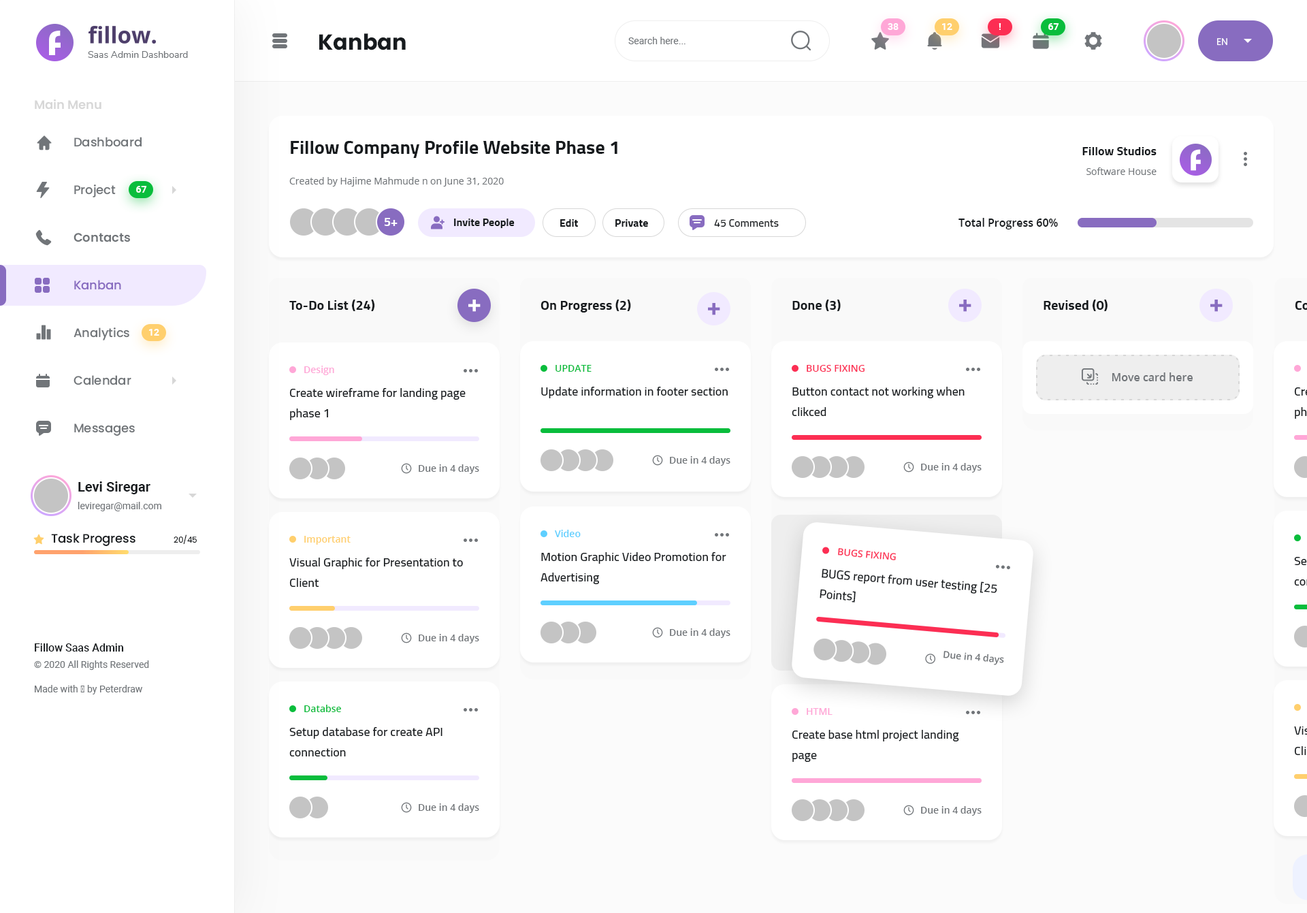
<style>
.page{position:relative;width:1307px;height:913px;background:#ffffff}
.page>*{position:absolute;margin:0}
.t1{font:9.5px "Roboto-Bold";color:#ffffff}
.t2{font:21.8px "Poppins-Bold";color:#171b1e}
.t3{font:9.5px "Roboto-Regular";color:#717579}
.t4{font:9.5px "Poppins-Regular";color:#ffffff}
.t5{font:9.5px "Nunito-Regular";color:#717579}
.t6{font:12.2px "Poppins-SemiBold";color:#d7d7d7}
.t7{font:12.2px "Poppins-Medium";color:#717579}
.t8{font:19.1px "Cairo-Bold";color:#171b1e}
.t9{font:12.2px "Cairo-Bold";color:#171b1e}
.t10{font:9.5px "OpenSans-Regular";color:#717579}
.t11{font:12.2px "Cairo-Bold";color:#ffffff}
.t12{font:10.9px "Cairo-Bold";color:#171b1e}
.t13{font:10.9px "Cairo-SemiBold";color:#171b1e}
.t14{font:10.9px "OpenSans-SemiBold";color:#171b1e}
.t15{font:12.2px "Poppins-SemiBold";color:#717579}
.t16{font:12.2px "Poppins-Medium";color:#886cc0}
.t17{font:13.6px "Cairo-Bold";color:#171b1e}
.t18{font:9.5px "OpenSans-SemiBold";color:#ffa7d7}
.t19{font:9.5px "OpenSans-SemiBold";color:#09bd3c}
.t20{font:9.5px "OpenSans-SemiBold";color:#fc2e53}
.t21{font:10.9px "OpenSans-SemiBold";color:#717579}
.t22{font:12.2px/20.4px "Cairo-SemiBold";color:#171b1e}
.t23{font:12.2px "Cairo-SemiBold";color:#171b1e}
.t24{font:9.5px "OpenSans-SemiBold";color:#717579}
.t25{font:13.6px "Roboto-Bold";color:#171b1e}
.t26{font:12.2px "Poppins-Medium";color:#171b1e}
.t27{font:9.5px "OpenSans-SemiBold";color:#5ecfff}
.t28{font:8.2px "Poppins-Regular";color:#171b1e}
.t29{font:9.5px "OpenSans-SemiBold";color:#ffcf6d}
.t30{font:10.9px "Roboto-Medium";color:#171b1e}
</style>
<div class="page">
<p class="t1" style="left:887px;top:23px;width:11px;height:7px">38</p>
<p class="t1" style="left:942px;top:23px;width:10px;height:7px">12</p>
<p class="t1" style="left:998px;top:23px;width:3px;height:7px">!</p>
<p class="t1" style="left:1048px;top:23px;width:11px;height:7px">67</p>
<p class="t2" style="left:319px;top:33px;width:87px;height:17px">Kanban</p>
<p class="t3" style="left:628px;top:37px;width:57px;height:7px">Search here...</p>
<p class="t4" style="left:1217px;top:38px;width:10px;height:8px">EN</p>
<p class="t5" style="left:88px;top:51px;width:100px;height:7px">Saas Admin Dashboard</p>
<p class="t6" style="left:35px;top:99px;width:66px;height:11px">Main Menu</p>
<p class="t7" style="left:74px;top:137px;width:68px;height:10px">Dashboard</p>
<p class="t8" style="left:291px;top:141px;width:326px;height:17px">Fillow Company Profile Website Phase 1</p>
<p class="t9" style="left:1082px;top:147px;width:74px;height:8px">Fillow Studios</p>
<p class="t10" style="left:1086px;top:167px;width:70px;height:8px">Software House</p>
<p class="t7" style="left:74px;top:184px;width:42px;height:13px">Project</p>
<p class="t1" style="left:136px;top:186px;width:11px;height:7px">67</p>
<p class="t10" style="left:289px;top:177px;width:215px;height:9px">Created by Hajime Mahmude n on June 31, 2020</p>
<p class="t11" style="left:384px;top:218px;width:13px;height:8px">5+</p>
<p class="t12" style="left:454px;top:218px;width:60px;height:10px">Invite People</p>
<p class="t12" style="left:560px;top:219px;width:18px;height:8px">Edit</p>
<p class="t12" style="left:615px;top:219px;width:33px;height:8px">Private</p>
<p class="t13" style="left:714px;top:219px;width:65px;height:8px">45 Comments</p>
<p class="t14" style="left:958px;top:218px;width:100px;height:11px">Total Progress 60%</p>
<p class="t15" style="left:73px;top:233px;width:57px;height:9px">Contacts</p>
<p class="t16" style="left:74px;top:280px;width:47px;height:10px">Kanban</p>
<p class="t17" style="left:289px;top:299px;width:86px;height:12px">To-Do List (24)</p>
<p class="t17" style="left:540px;top:299px;width:91px;height:13px">On Progress (2)</p>
<p class="t17" style="left:792px;top:299px;width:48px;height:12px">Done (3)</p>
<p class="t17" style="left:1043px;top:299px;width:64px;height:12px">Revised (0)</p>
<p class="t7" style="left:73px;top:327px;width:56px;height:13px">Analytics</p>
<p class="t1" style="left:149px;top:329px;width:10px;height:7px">12</p>
<p class="t18" style="left:304px;top:365px;width:30px;height:10px">Design</p>
<p class="t19" style="left:555px;top:365px;width:36px;height:7px">UPDATE</p>
<p class="t20" style="left:806px;top:365px;width:58px;height:7px">BUGS FIXING</p>
<p class="t7" style="left:73px;top:375px;width:58px;height:10px">Calendar</p>
<p class="t21" style="left:1111px;top:372px;width:82px;height:9px">Move card here</p>
<p class="t22" style="left:289px;top:388px;width:176px;height:32px">Create wireframe for landing page phase 1</p>
<p class="t23" style="left:541px;top:387px;width:186px;height:11px">Update information in footer section</p>
<p class="t22" style="left:791px;top:387px;width:173px;height:29px">Button contact not working when clikced</p>
<p class="t7" style="left:74px;top:423px;width:61px;height:13px">Messages</p>
<p class="t24" style="left:670px;top:456px;width:60px;height:9px">Due in 4 days</p>
<p class="t24" style="left:419px;top:464px;width:60px;height:10px">Due in 4 days</p>
<p class="t24" style="left:921px;top:463px;width:60px;height:9px">Due in 4 days</p>
<p class="t25" style="left:78px;top:481px;width:72px;height:13px">Levi Siregar</p>
<p class="t3" style="left:78px;top:502px;width:83px;height:9px">leviregar@mail.com</p>
<p class="t26" style="left:51px;top:533px;width:84px;height:13px">Task Progress</p>
<p class="t27" style="left:555px;top:529px;width:25px;height:8px">Video</p>
<p class="t28" style="left:174px;top:534px;width:23px;height:10px">20/45</p>
<p class="t29" style="left:304px;top:536px;width:46px;height:8px">Important</p>
<p class="t22" style="left:289px;top:557px;width:174px;height:30px">Visual Graphic for Presentation to Client</p>
<p class="t22" style="left:540px;top:552px;width:186px;height:32px">Motion Graphic Video Promotion for Advertising</p>
<p class="t20" style="left:838px;top:548px;width:58px;height:12px;rotate:5deg">BUGS FIXING</p>
<p class="t23" style="left:819px;top:568px;width:178px;height:34px;rotate:5deg">BUGS report from user testing [25 Points]</p>
<p class="t24" style="left:670px;top:628px;width:60px;height:10px">Due in 4 days</p>
<p class="t24" style="left:419px;top:634px;width:60px;height:9px">Due in 4 days</p>
<p class="t30" style="left:35px;top:643px;width:89px;height:8px">Fillow Saas Admin</p>
<p class="t24" style="left:943px;top:651px;width:61px;height:14px;rotate:5deg">Due in 4 days</p>
<p class="t3" style="left:34px;top:660px;width:115px;height:10px">© 2020 All Rights Reserved</p>
<p class="t3" style="left:35px;top:685px;width:108px;height:9px">Made with ♥ by Peterdraw</p>
<p class="t19" style="left:304px;top:704px;width:37px;height:8px">Databse</p>
<p class="t18" style="left:806px;top:708px;width:26px;height:7px">HTML</p>
<p class="t22" style="left:289px;top:727px;width:153px;height:29px">Setup database for create API connection</p>
<p class="t22" style="left:791px;top:730px;width:168px;height:32px">Create base html project landing page</p>
<p class="t24" style="left:419px;top:803px;width:60px;height:10px">Due in 4 days</p>
<p class="t24" style="left:921px;top:806px;width:60px;height:9px">Due in 4 days</p>
</div>
